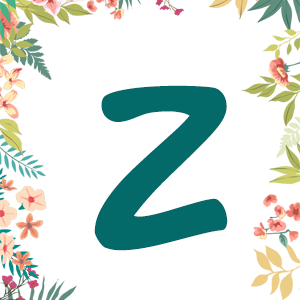
<style>
.page{position:relative;width:300px;height:300px;background:#ffffff}
.page>*{position:absolute;margin:0}
.t1{font:305.6px "BookAkhanake";color:#036969}
</style>
<div class="page">
<p class="t1" style="left:94px;top:85px;width:134px;height:166px">Z</p>
</div>
